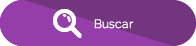
<style>
.page{position:relative;width:196px;height:46px;background:#733480}
.page>*{position:absolute;margin:0}
.t1{font:12px "Raleway-Light";color:#ffffff;font-weight:bold}
</style>
<div class="page">
<p class="t1" style="left:94px;top:19px;width:40px;height:10px">Buscar</p>
</div>
